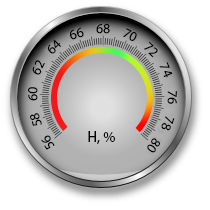
<style>
.page{position:relative;width:210px;height:210px;background:#ffffff}
.page>*{position:absolute;margin:0}
.t1{font:13.7px "MyriadPro-Regular";color:#000000}
.t2{font:15px "MyriadPro-Regular";color:#000000}
</style>
<div class="page">
<p class="t1" style="left:69px;top:27px;width:15px;height:13px;rotate:-18deg">66</p>
<p class="t1" style="left:96px;top:23px;width:14px;height:11px;rotate:1deg">68</p>
<p class="t1" style="left:123px;top:28px;width:14px;height:13px;rotate:25deg">70</p>
<p class="t1" style="left:47px;top:39px;width:14px;height:15px;rotate:-45deg">64</p>
<p class="t1" style="left:144px;top:41px;width:14px;height:17px;rotate:42deg">72</p>
<p class="t1" style="left:32px;top:60px;width:13px;height:15px;rotate:-64deg">62</p>
<p class="t1" style="left:159px;top:62px;width:14px;height:16px;rotate:67deg">74</p>
<p class="t1" style="left:28px;top:87px;width:10px;height:14px;rotate:-87deg">60</p>
<p class="t1" style="left:167px;top:91px;width:10px;height:13px;rotate:93deg">76</p>
<p class="t1" style="left:30px;top:113px;width:12px;height:13px;rotate:-105deg">58</p>
<p class="t1" style="left:161px;top:116px;width:14px;height:15px;rotate:108deg">78</p>
<p class="t1" style="left:41px;top:135px;width:14px;height:15px;rotate:-124deg">56</p>
<p class="t2" style="left:88px;top:131px;width:27px;height:13px">H, %</p>
<p class="t1" style="left:147px;top:138px;width:13px;height:15px;rotate:126deg">80</p>
</div>
